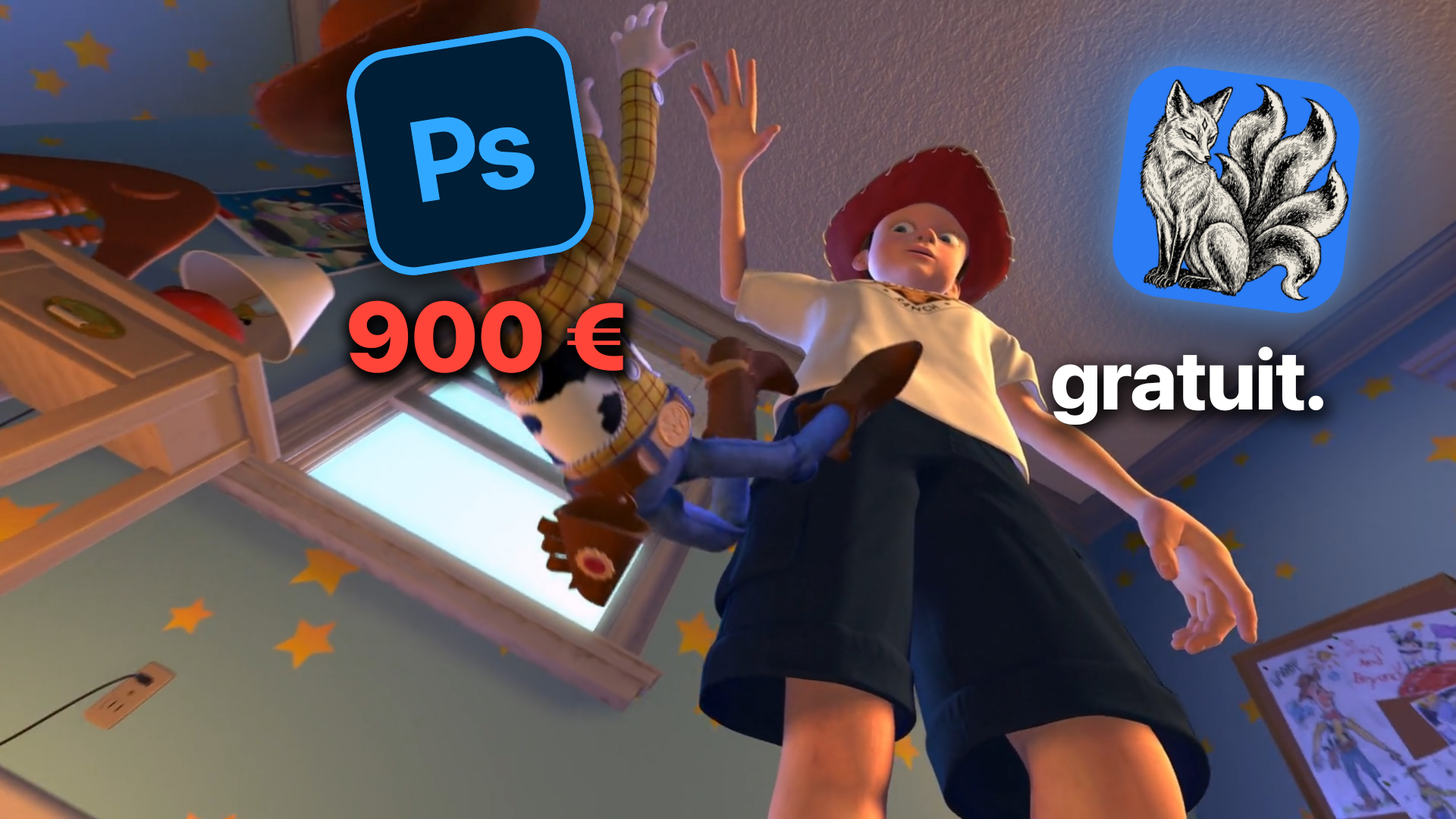
<style>
.page{position:relative;width:1456px;height:819px}
.page>*{position:absolute;margin:0}
.t1{font:98.6px ".SFNS-Regular";letter-spacing:-0.01em;color:#ff453a}
.t2{font:83.4px ".SFNS-Regular";letter-spacing:-0.01em;color:#ffffff}
</style>
<div class="page">
<p class="t1" style="left:348px;top:300px;width:276px;height:74px">900 €</p>
<p class="t2" style="left:1051px;top:347px;width:273px;height:79px">gratuit.</p>
</div>
